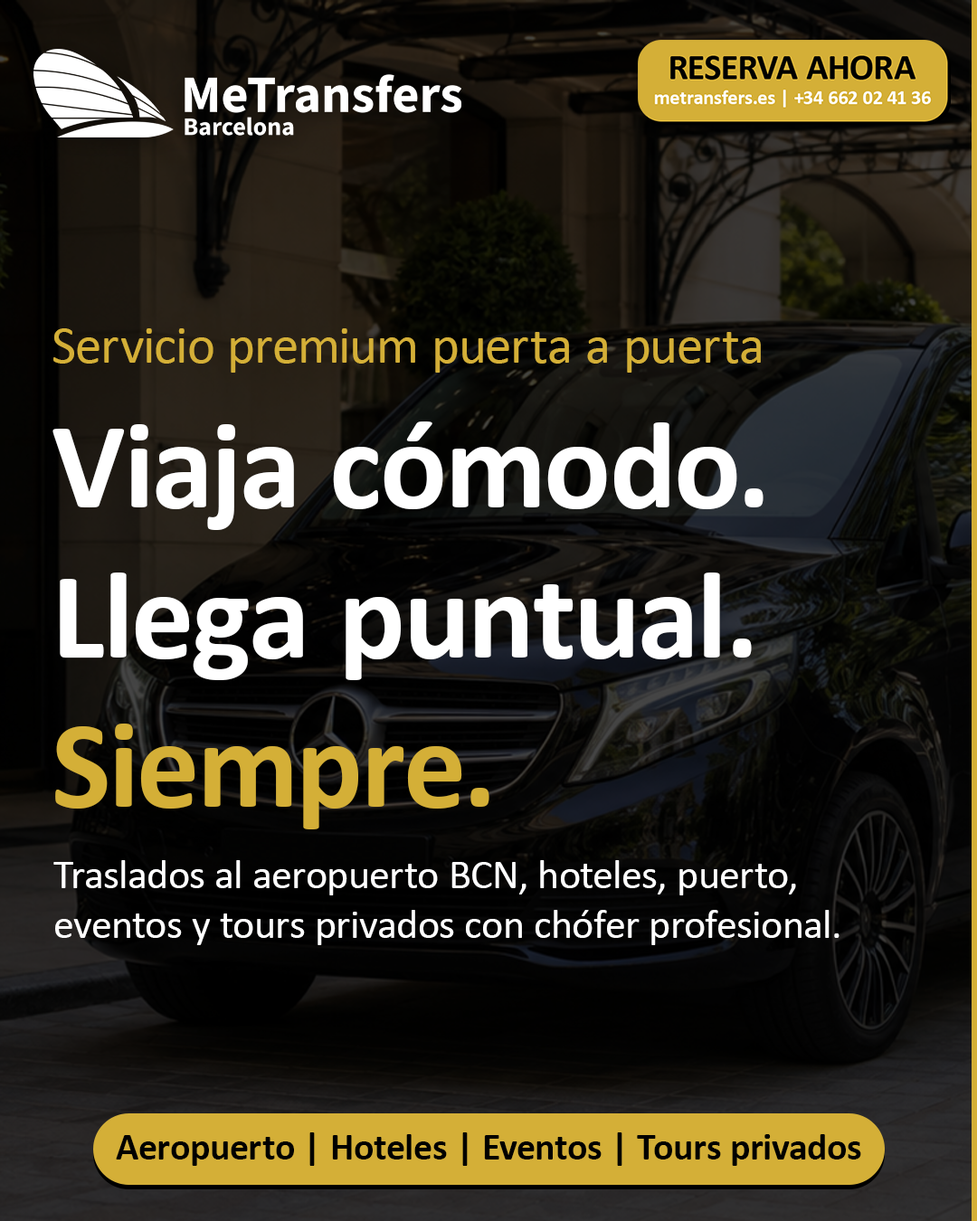
<style>
.page{position:relative;width:977px;height:1221px}
.page>*{position:absolute;margin:0}
.t1{font:53.7px "Calibri";color:#d4af37}
.t2{font:124.8px "Calibri-Bold";color:#ffffff}
.t3{font:124.8px "Calibri-Bold";color:#d4af37}
.t4{font:41.4px "Calibri";color:#ffffff}
</style>
<div class="page">
<p class="t1" style="left:53px;top:328px;width:708px;height:45px">Servicio premium puerta a puerta</p>
<p class="t2" style="left:52px;top:421px;width:711px;height:408px">Viaja cómodo.<br>Llega puntual.<br><span class="t3">Siempre.</span></p>
<p class="t4" style="left:53px;top:860px;width:786px;height:85px">Traslados al aeropuerto BCN, hoteles, puerto,<br>eventos y tours privados con chófer profesional.</p>
</div>
